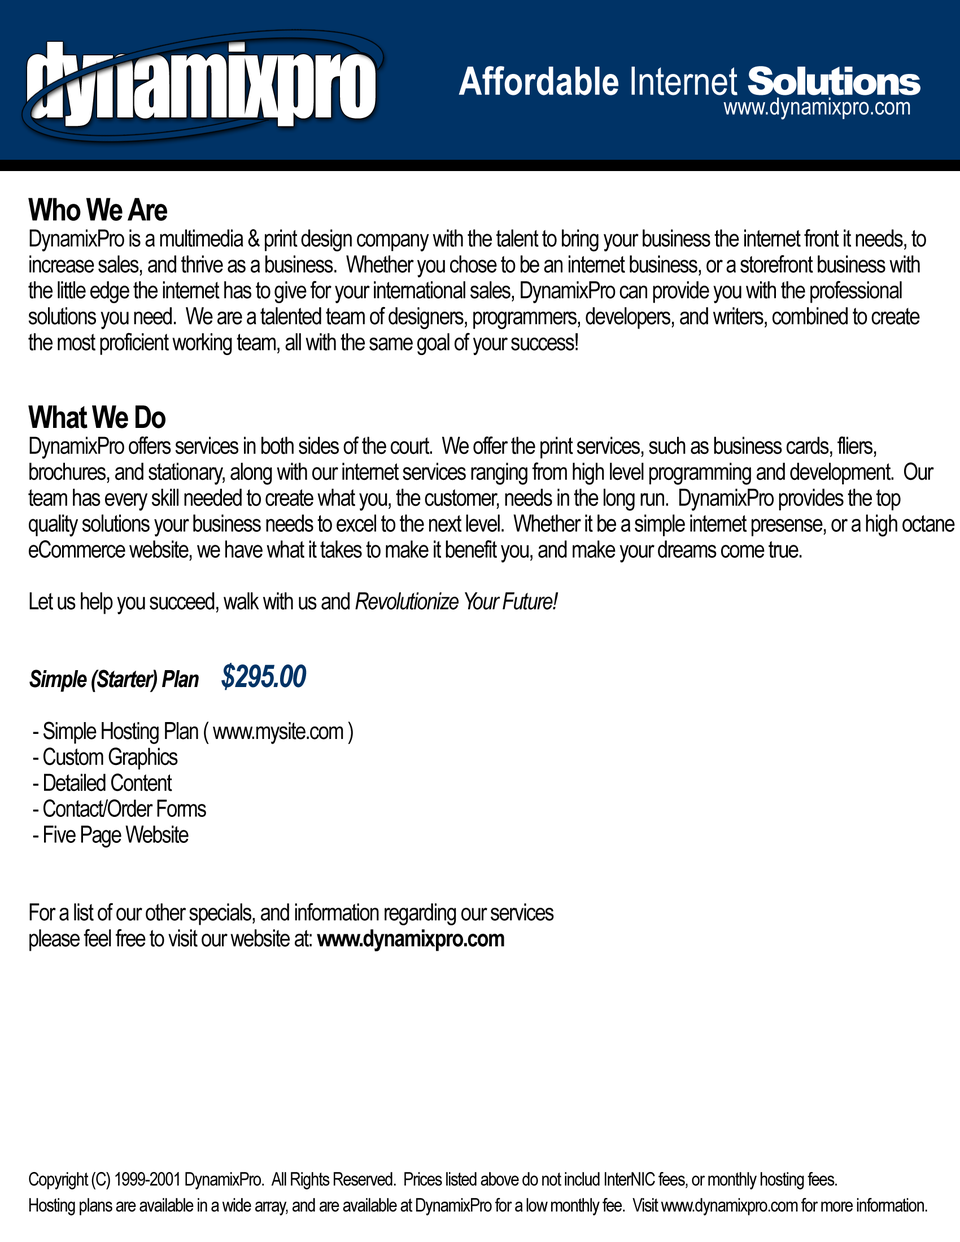
<style>
.page{position:relative;width:960px;height:1242px;background:#ffffff}
.page>*{position:absolute;margin:0}
.t1{font:95.5px "Impact";letter-spacing:-0.04em;color:#ffffff;scale:0.82 1}
.t2{font:23.5px/19.7px "ArialNarrow";color:#ffffff}
.t3{font:39.2px/19.7px "ArialNarrow-Bold";color:#ffffff}
.t4{font:39.2px/19.7px "ArialNarrow";color:#ffffff}
.t5{font:39.2px/19.7px "Arial-Black";letter-spacing:-0.08em;color:#ffffff}
.t6{font:23.5px/25.9px "ArialNarrow";letter-spacing:-0.04em;color:#000000}
.t7{font:31.4px/25.9px "ArialNarrow-Bold";letter-spacing:-0.04em;color:#000000}
.t8{font:23.5px/25.9px "ArialNarrow-Italic";letter-spacing:-0.04em;color:#000000}
.t9{font:23.5px/25.9px "ArialNarrow-BoldItalic";letter-spacing:-0.04em;color:#000000}
.t10{font:31.4px/25.9px "ArialNarrow-BoldItalic";letter-spacing:-0.04em;color:#003366}
.t11{font:23.5px/25.9px "ArialNarrow-Bold";letter-spacing:-0.04em;color:#000000}
.t12{font:18.8px/25.9px "ArialNarrow";letter-spacing:-0.04em;color:#000000}
</style>
<div class="page">
<p class="t1" style="left:27px;top:42px;width:348px;height:84px">dynamixpro</p>
<p class="t2" style="left:458px;top:66px;width:462px;height:54px;text-align:right"><span class="t3">Affordable</span><span class="t4"> Internet </span><span class="t5">Solutions<br></span>www.dynamixpro.com</p>
<p class="t6" style="left:28px;top:198px;width:927px;height:753px"><span class="t7">Who We Are<br></span>DynamixPro is a multimedia &amp; print design company with the talent to bring your business the internet front it needs, to<br>increase sales, and thrive as a business.  Whether you chose to be an internet business, or a storefront business with <br>the little edge the internet has to give for your international sales, DynamixPro can provide you with the professional<br>solutions you need.  We are a talented team of designers, programmers, developers, and writers, combined to create<br>the most proficient working team, all with the same goal of your success!<br><br><br><span class="t7">What We Do<br></span>DynamixPro offers services in both sides of the court.  We offer the print services, such as business cards, fliers, <br>brochures, and stationary, along with our internet services ranging from high level programming and development.  Our<br>team has every skill needed to create what you, the customer, needs in the long run.  DynamixPro provides the top<br>quality solutions your business needs to excel to the next level.  Whether it be a simple internet presense, or a high octane<br>eCommerce website, we have what it takes to make it benefit you, and make your dreams come true.<br><br>Let us help you succeed, walk with us and <span class="t8">Revolutionize Your Future!<br><br><br></span><span class="t9">Simple (Starter) Plan     </span><span class="t10">$295.00<br><br></span> - Simple Hosting Plan ( www.mysite.com )<br> - Custom Graphics<br> - Detailed Content<br> - Contact/Order Forms<br> - Five Page Website<br><br><br>For a list of our other specials, and information regarding our services<br>please feel free to visit our website at: <span class="t11">www.dynamixpro.com</span></p>
<p class="t12" style="left:29px;top:1172px;width:898px;height:44px">Copyright (C) 1999-2001 DynamixPro.  All Rights Reserved.  Prices listed above do not includ InterNIC fees, or monthly hosting fees.  <br>Hosting plans are available in a wide array, and are available at DynamixPro for a low monthly fee.  Visit www.dynamixpro.com for more information.</p>
</div>
